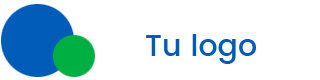
<style>
.page{position:relative;width:320px;height:80px;background:#ffffff}
.page>*{position:absolute;margin:0}
.t1{font:30px "Poppins-Medium";color:#005cb8}
</style>
<div class="page">
<p class="t1" style="left:146px;top:34px;width:110px;height:30px">Tu logo</p>
</div>
